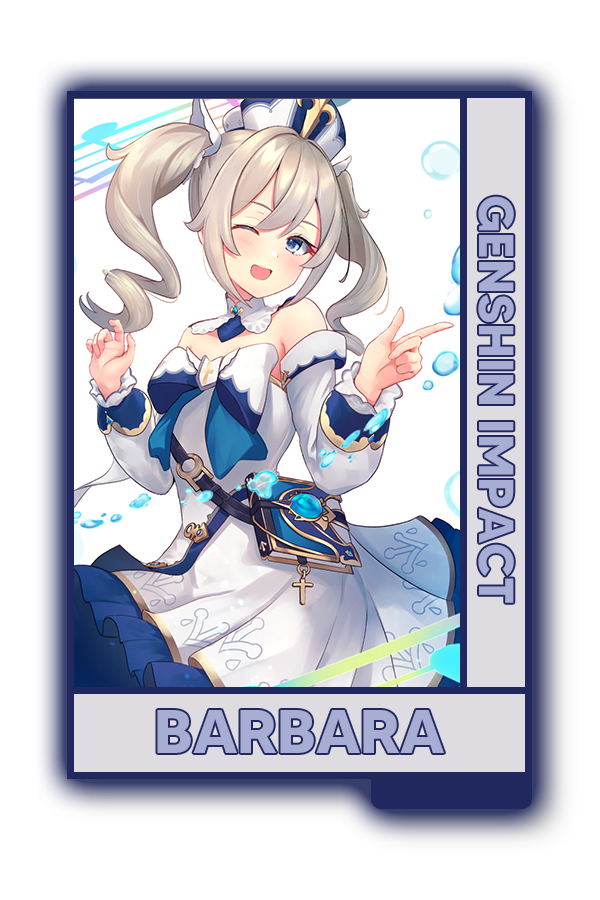
<style>
.page{position:relative;width:600px;height:900px;background:#ffffff}
.page>*{position:absolute;margin:0}
.t1{font:48.8px "MADETOMMY-Bold";color:#b2b8d1}
.t2{font:61.5px "MADETOMMY-Bold";color:#b2b8d1}
</style>
<div class="page">
<p class="t1" style="left:478px;top:196px;width:36px;height:407px;rotate:90deg">GENSHIN IMPACT</p>
<p class="t2" style="left:157px;top:710px;width:287px;height:43px">BARBARA</p>
</div>
